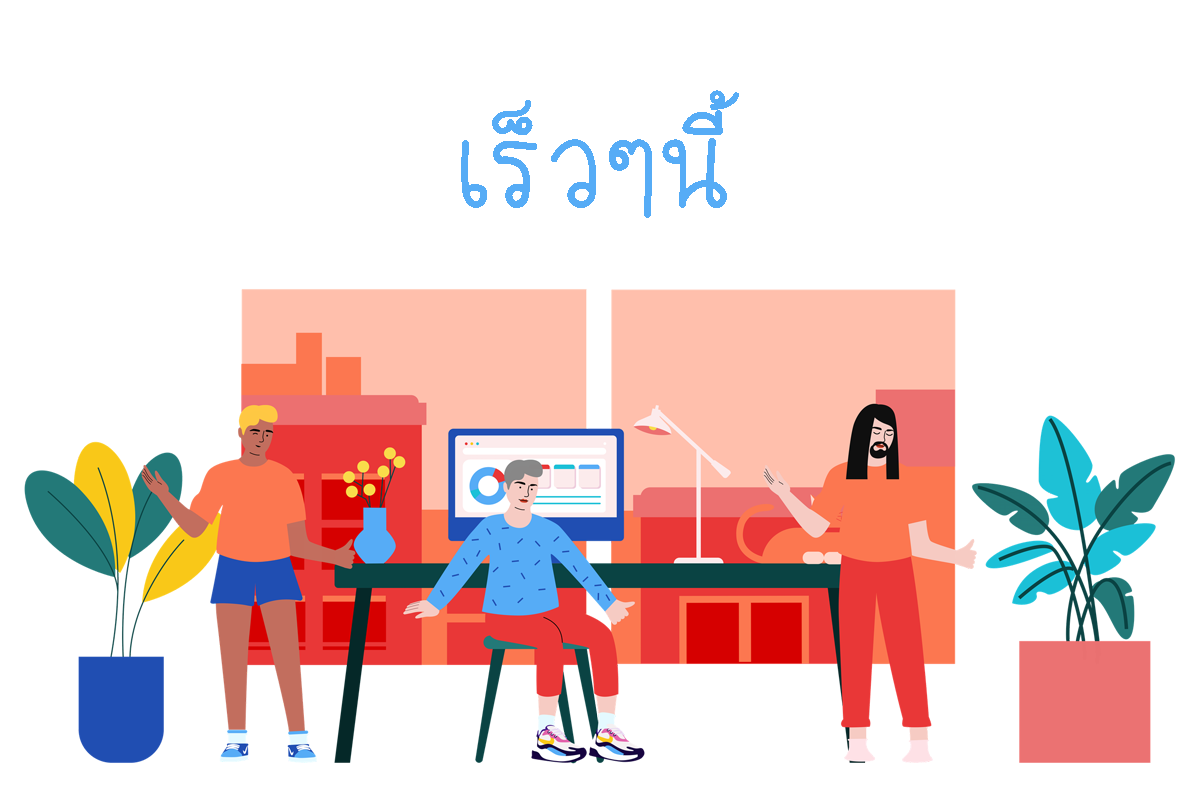
<style>
.page{position:relative;width:1200px;height:800px;background:#ffffff}
.page>*{position:absolute;margin:0}
.t1{font:123px "tahomo-Medium";color:#56acf6}
</style>
<div class="page">
<p class="t1" style="left:461px;top:90px;width:278px;height:128px">เร็วๆนี้</p>
</div>
